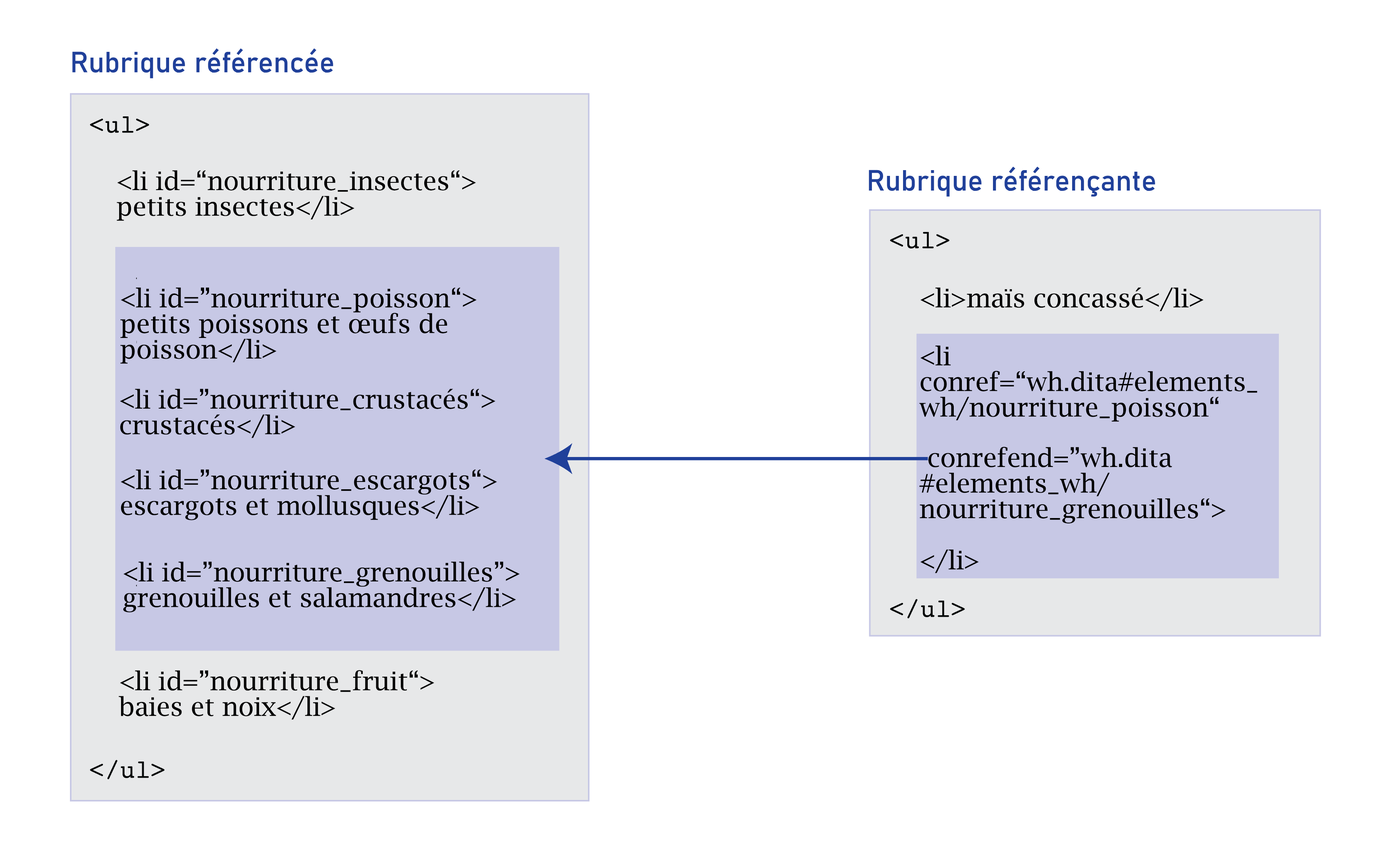
<style>
.page{position:relative;width:1393px;height:856px;background:#ffffff}
.page>*{position:absolute;margin:0}
.t1{font:28.8px "Bahnschrift";color:#20409a}
.t2{font:25.6px/25.6px "LucidaBright";color:#000000}
.t3{font:25.6px "LucidaBright";color:#000000}
</style>
<div class="page">
<p class="t1" style="left:72px;top:48px;width:261px;height:30px">Rubrique référencée</p>
<p class="t2" style="left:117px;top:170px;width:359px;height:51px">&lt;li id=“nourriture_insectes“&gt;<br>petits insectes&lt;/li&gt;</p>
<p class="t1" style="left:869px;top:167px;width:286px;height:30px">Rubrique référençante</p>
<p class="t2" style="left:120px;top:287px;width:356px;height:77px">&lt;li id=”nourriture_poisson“&gt;<br>petits poissons et œufs de poisson&lt;/li&gt;</p>
<p class="t3" style="left:920px;top:287px;width:283px;height:25px">&lt;li&gt;maïs concassé&lt;/li&gt;</p>
<p class="t2" style="left:919px;top:345px;width:338px;height:77px">&lt;li conref=“wh.dita#elements_wh/nourriture_poisson“</p>
<p class="t2" style="left:120px;top:389px;width:375px;height:49px">&lt;li id=”nourriture_crustacés“&gt;<br>crustacés&lt;/li&gt;</p>
<p class="t2" style="left:919px;top:447px;width:306px;height:127px">conrefend=”wh.dita<br>#elements_wh/<br>nourriture_grenouilles“&gt;<br><br>&lt;/li&gt;</p>
<p class="t2" style="left:121px;top:469px;width:376px;height:52px">&lt;li id=”nourriture_escargots“&gt;<br>escargots et mollusques&lt;/li&gt;</p>
<p class="t2" style="left:123px;top:562px;width:397px;height:51px">&lt;li id=”nourriture_grenouilles”&gt;<br>grenouilles et salamandres&lt;/li&gt;</p>
<p class="t2" style="left:119px;top:670px;width:315px;height:50px">&lt;li id=”nourriture_fruit“&gt; <br>baies et noix&lt;/li&gt;</p>
</div>
